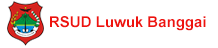
<style>
.page{position:relative;width:218px;height:48px;background:#ffffff}
.page>*{position:absolute;margin:0}
.t1{font:15px "Arial-BoldMT";color:#ee130e}
</style>
<div class="page">
<p class="t1" style="left:50px;top:16px;width:156px;height:15px">RSUD Luwuk Banggai</p>
</div>
